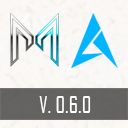
<style>
.page{position:relative;width:128px;height:128px}
.page>*{position:absolute;margin:0}
.t1{font:22px "AgencyFB-Reg";color:#ffffff}
</style>
<div class="page">
<p class="t1" style="left:39px;top:96px;width:52px;height:17px">V. 0.6.0</p>
</div>
